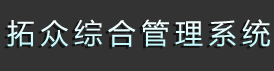
<style>
.page{position:relative;width:274px;height:71px;background:#333333}
.page>*{position:absolute;margin:0}
.t1{font:28px "MicrosoftYaHei";letter-spacing:0.2em}
</style>
<div class="page">
<p class="t1" style="left:7px;top:19px;width:263px;height:28px">拓众综合管理系统</p>
</div>
